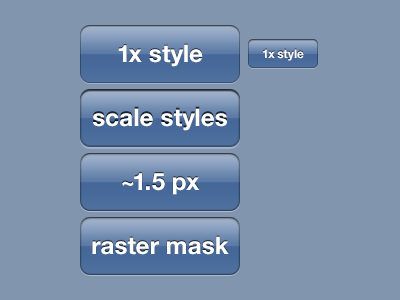
<style>
.page{position:relative;width:400px;height:300px;background:#8195af}
.page>*{position:absolute;margin:0}
.t1{font:24px "HelveticaNeueLTStd-Bd";color:#ffffff}
.t2{font:12px "HelveticaNeueLTStd-Bd";color:#ffffff}
</style>
<div class="page">
<p class="t1" style="left:118px;top:44px;width:85px;height:23px">1x style</p>
<p class="t2" style="left:263px;top:49px;width:41px;height:12px">1x style</p>
<p class="t1" style="left:93px;top:108px;width:134px;height:23px">scale styles</p>
<p class="t1" style="left:122px;top:173px;width:78px;height:22px">~1.5 px</p>
<p class="t1" style="left:92px;top:236px;width:137px;height:19px">raster mask</p>
</div>
